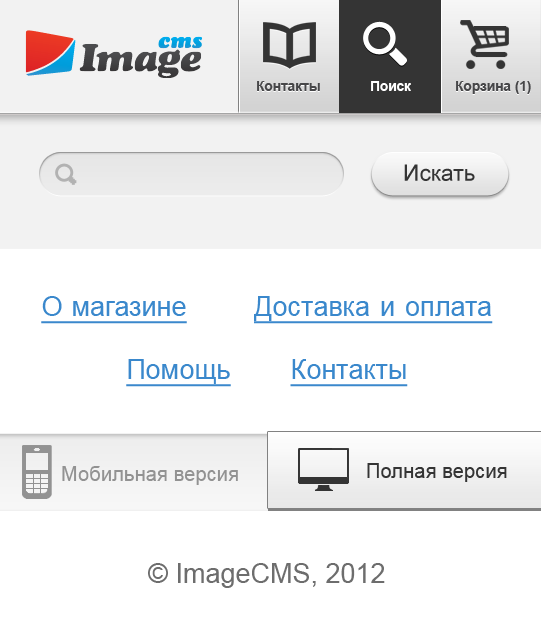
<style>
.page{position:relative;width:541px;height:634px;background:#ffffff}
.page>*{position:absolute;margin:0}
.t1{font:13.6px "Arial-BoldMT";color:#474749}
.t2{font:13.6px "Arial-BoldMT";color:#ffffff}
.t3{font:22.7px "ArialMT";color:#343434}
.t4{font:27px/63px "ArialMT";color:#3a88cc;text-decoration:underline}
.t5{font:20.3px "ArialMT";color:#929292}
.t6{font:20.3px "ArialMT";color:#343434}
.t7{font:27px "ArialMT";color:#6d6d6d}
</style>
<div class="page">
<p class="t1" style="left:257px;top:81px;width:63px;height:10px">Контакты</p>
<p class="t2" style="left:371px;top:81px;width:40px;height:10px">Поиск</p>
<p class="t1" style="left:456px;top:81px;width:75px;height:13px">Корзина (1)</p>
<p class="t3" style="left:404px;top:164px;width:71px;height:17px">Искать</p>
<p class="t4" style="left:41px;top:296px;width:452px;height:91px;text-align:center">Омагазине         Доставкаиоплата           <br>Помощь        Контакты</p>
<p class="t5" style="left:62px;top:466px;width:176px;height:19px">Мобильная версия</p>
<p class="t6" style="left:367px;top:463px;width:140px;height:19px">Полная версия</p>
<p class="t7" style="left:148px;top:563px;width:237px;height:25px">© ImageCMS, 2012</p>
</div>
